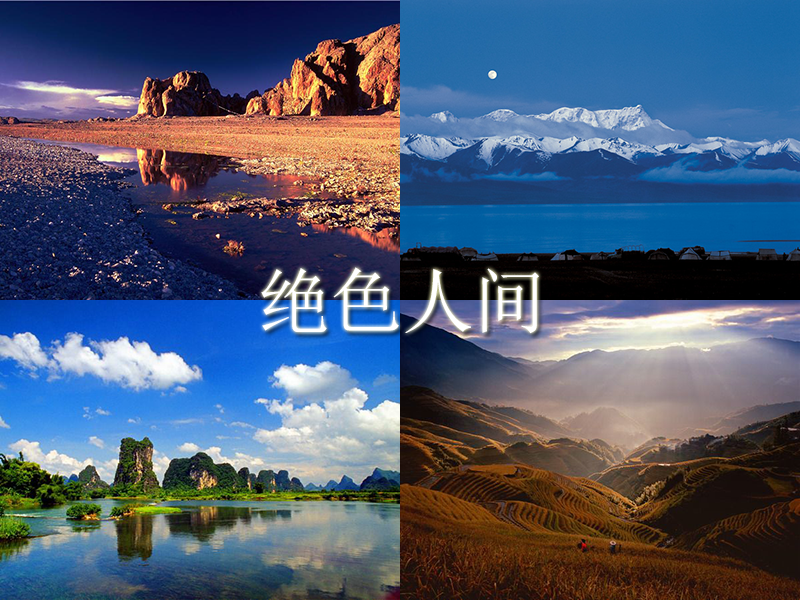
<style>
.page{position:relative;width:800px;height:600px}
.page>*{position:absolute;margin:0}
.t1{font:72px "SimSun";color:#ffffff}
</style>
<div class="page">
<p class="t1" style="left:261px;top:267px;width:278px;height:67px">绝色人间</p>
</div>
